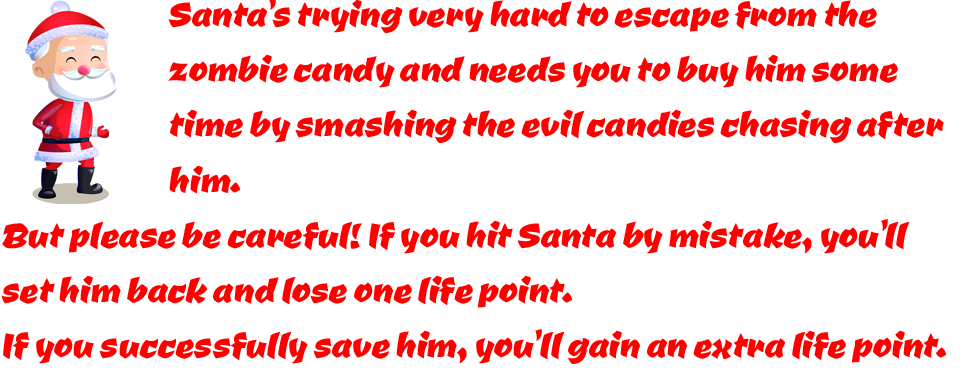
<style>
.page{position:relative;width:968px;height:389px;background:#ffffff}
.page>*{position:absolute;margin:0}
.t1{font:46px "CevicheOne-Regular";color:#fe0000}
</style>
<div class="page">
<p class="t1" style="left:1px;top:0px;width:945px;height:364px">Santa’s trying very hard to escape from the <br>                            zombie candy and needs you to buy him some <br>                            time by smashing the evil candies chasing after <br>                            him.  <br>But please be careful! If you hit Santa by mistake, you’ll <br>set him back and lose one life point. <br>If you successfully save him, you’ll gain an extra life point.</p>
</div>
